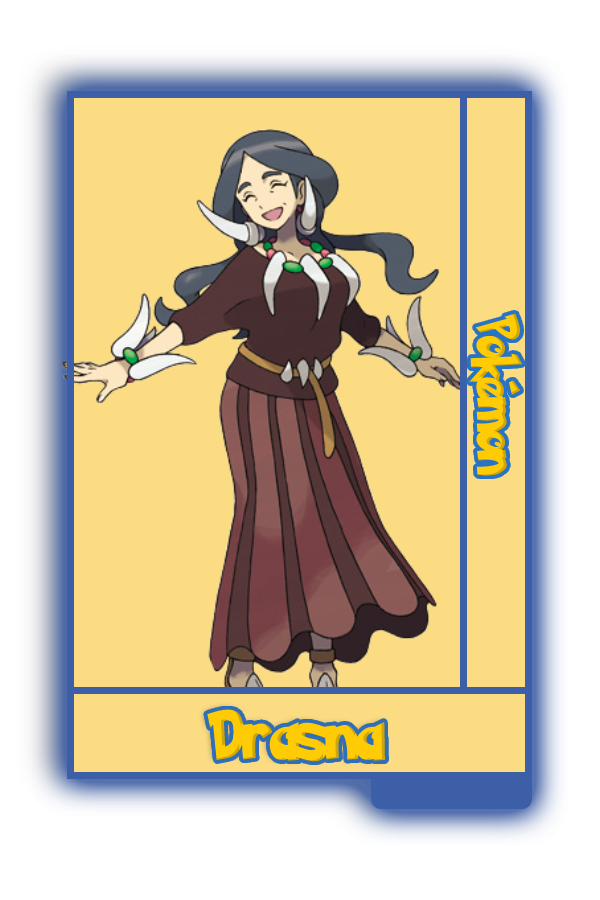
<style>
.page{position:relative;width:600px;height:900px;background:#fbdc83}
.page>*{position:absolute;margin:0}
.t1{font:48.8px "PokemonSolidNormal";color:#ffcb05;scale:0.8 1}
.t2{font:56.6px "PokemonSolidNormal";color:#ffcb05;scale:0.92 1}
</style>
<div class="page">
<p class="t1" style="left:469px;top:313px;width:54px;height:163px;rotate:90deg">Pokémon</p>
<p class="t2" style="left:207px;top:709px;width:178px;height:53px">Drasna</p>
</div>
